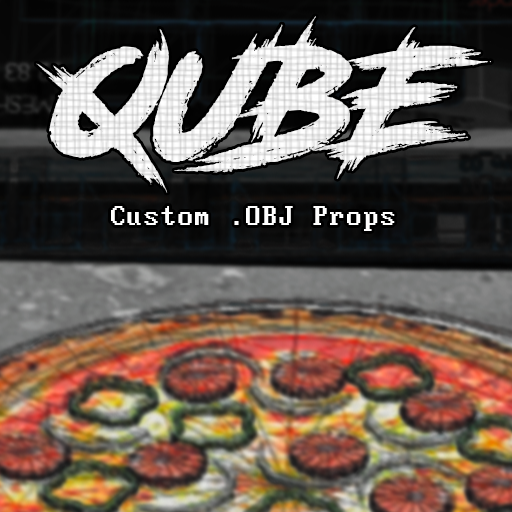
<style>
.page{position:relative;width:512px;height:512px}
.page>*{position:absolute;margin:0}
.t1{font:152.5px "RoadRage";color:#ffffff}
.t2{font:30px "PerfectDOSVGA437Win";color:#ffffff}
</style>
<div class="page">
<p class="t1" style="left:36px;top:16px;width:456px;height:177px">QUBE</p>
<p class="t2" style="left:111px;top:206px;width:284px;height:25px">Custom .OBJ Props</p>
</div>
